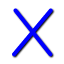
<style>
.page{position:relative;width:64px;height:64px;background:#ffffff}
.page>*{position:absolute;margin:0}
.t1{font:70px "ComicNeue-Regular";color:#0000ff}
</style>
<div class="page">
<p class="t1" style="left:12px;top:8px;width:41px;height:49px">X</p>
</div>
